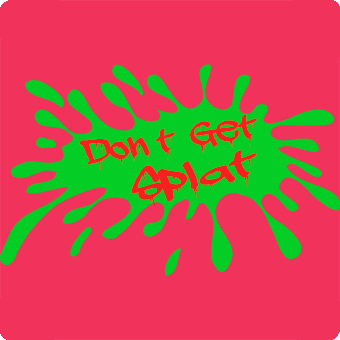
<style>
.page{position:relative;width:340px;height:340px;background:#f1325b}
.page>*{position:absolute;margin:0}
.t1{font:44.3px "adrippingmarker";color:#f81f1f;scale:1.24 1}
.t2{font:49.6px "adrippingmarker";color:#f81f1f;scale:1.64 1}
</style>
<div class="page">
<p class="t1" style="left:79px;top:114px;width:178px;height:57px;rotate:-10deg">Don’t  Get</p>
<p class="t2" style="left:131px;top:150px;width:126px;height:58px;rotate:-13deg">Splat</p>
</div>
